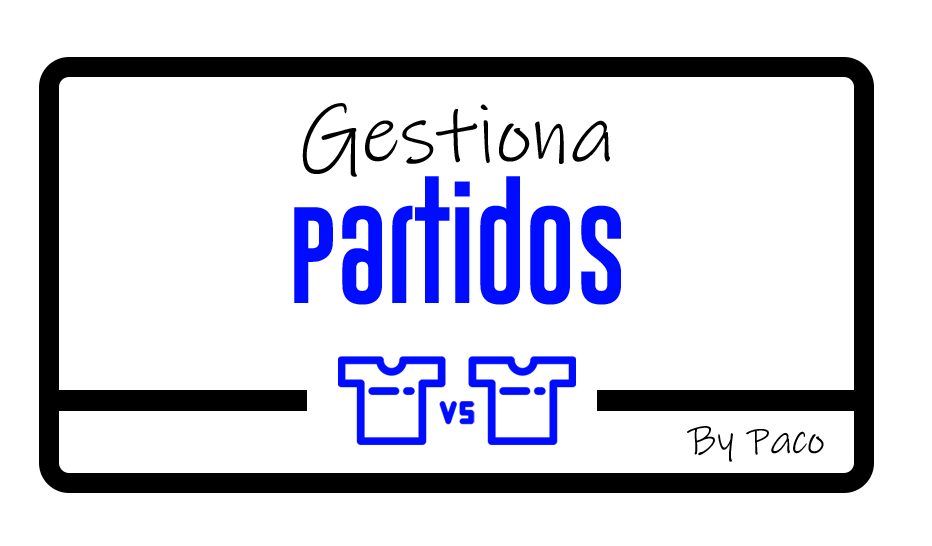
<style>
.page{position:relative;width:932px;height:546px;background:#ffffff}
.page>*{position:absolute;margin:0}
.t1{font:83.3px/141.7px "InkFree";color:#000000}
.t2{font:100px/141.7px "GoboldUplow";color:#000cff}
.t3{font:41.7px "InkFree";color:#000000}
</style>
<div class="page">
<p class="t1" style="left:294px;top:103px;width:327px;height:202px;text-align:center">Gestiona<br><span class="t2">Partidos</span></p>
<p class="t3" style="left:687px;top:426px;width:137px;height:36px">By Paco</p>
</div>
